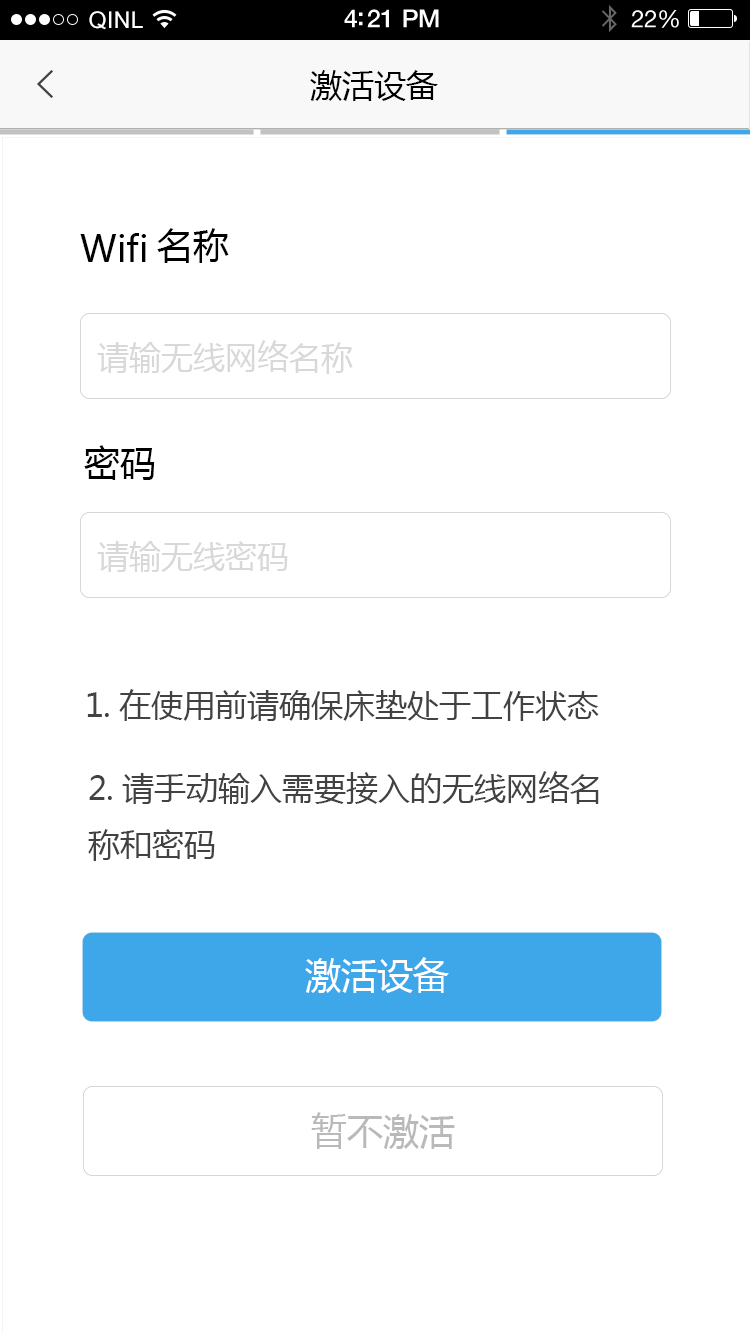
<style>
.page{position:relative;width:750px;height:1334px;background:#ffffff}
.page>*{position:absolute;margin:0}
.t1{font:23px "ArialUnicodeMS";letter-spacing:0.02em;color:#ffffff}
.t2{font:25px "HelveticaNeue-Medium";letter-spacing:-0.02em;color:#ffffff}
.t3{font:24px "HelveticaNeue";letter-spacing:-0.02em;color:#ffffff}
.t4{font:32px "MicrosoftYaHei"}
.t5{font:32px "MicrosoftYaHei";color:#000000}
.t6{font:36px "MicrosoftYaHei";color:#000000}
.t7{font:32px "MicrosoftYaHei";color:#d8d8d8}
.t8{font:32px "MicrosoftYaHei";color:#424242}
.t9{font:36px "MicrosoftYaHei";color:#ffffff}
.t10{font:36px "MicrosoftYaHei";color:#b9b9b9}
</style>
<div class="page">
<p class="t1" style="left:89px;top:11px;width:54px;height:19px">QINL</p>
<p class="t1" style="left:89px;top:11px;width:54px;height:19px">QINL</p>
<p class="t2" style="left:344px;top:9px;width:95px;height:19px">4:21 PM</p>
<p class="t2" style="left:344px;top:9px;width:95px;height:19px">4:21 PM</p>
<p class="t3" style="left:631px;top:10px;width:48px;height:18px">22%</p>
<p class="t3" style="left:631px;top:10px;width:48px;height:18px">22%</p>
<p class="t4" style="left:310px;top:69px;width:128px;height:31px">添加设备</p>
<p class="t5" style="left:310px;top:70px;width:128px;height:31px">激活设备</p>
<p class="t6" style="left:80px;top:233px;width:66px;height:29px">Wifi</p>
<p class="t6" style="left:157px;top:228px;width:72px;height:35px">名称</p>
<p class="t7" style="left:97px;top:340px;width:256px;height:34px">请输无线网络名称</p>
<p class="t6" style="left:84px;top:445px;width:71px;height:35px">密码</p>
<p class="t7" style="left:97px;top:541px;width:191px;height:31px">请输无线密码</p>
<p class="t8" style="left:87px;top:689px;width:512px;height:32px">1.在使用前请确保床垫处于工作状态</p>
<p class="t8" style="left:88px;top:771px;width:511px;height:90px">2.请手动输入需要接入的无线网络名<br>称和密码</p>
<p class="t9" style="left:305px;top:957px;width:144px;height:36px">激活设备</p>
<p class="t10" style="left:311px;top:1112px;width:144px;height:37px">暂不激活</p>
</div>
